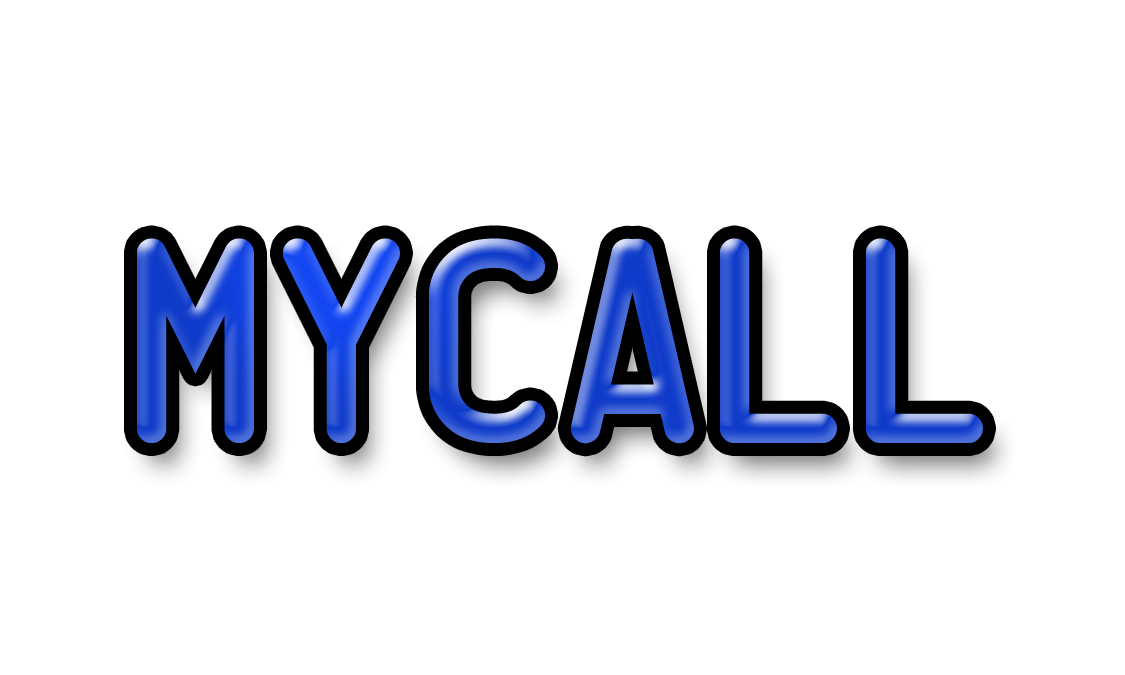
<style>
.page{position:relative;width:1125px;height:675px;background:#ffffff}
.page>*{position:absolute;margin:0}
.t1{font:298.9px "CQMono"}
</style>
<div class="page">
<p class="t1" style="left:137px;top:238px;width:846px;height:206px">MYCALL</p>
</div>
